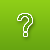
<style>
.page{position:relative;width:50px;height:50px}
.page>*{position:absolute;margin:0}
.t1{font:30px "MicrosoftSansSerif";color:#5f9d10}
</style>
<div class="page">
<p class="t1" style="left:18px;top:14px;width:14px;height:22px">?</p>
</div>
